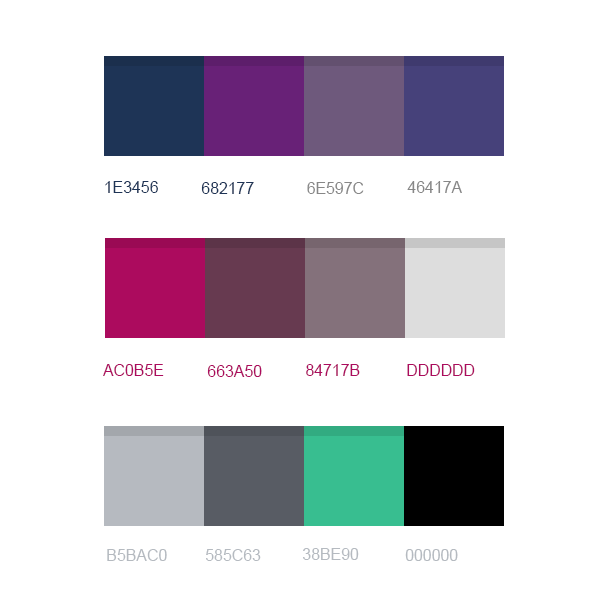
<style>
.page{position:relative;width:600px;height:600px;background:#ffffff}
.page>*{position:absolute;margin:0}
.t1{font:15.9px "ArialMT";color:#1e3456;text-transform:uppercase}
.t2{font:15.9px "ArialMT";color:#878787;text-transform:uppercase}
.t3{font:15.9px "ArialMT";color:#ac0b5e;text-transform:uppercase}
.t4{font:15.9px "ArialMT";color:#b5bac0;text-transform:uppercase}
</style>
<div class="page">
<p class="t1" style="left:105px;top:181px;width:53px;height:12px">1e3456</p>
<p class="t1" style="left:201px;top:182px;width:53px;height:12px">682177</p>
<p class="t2" style="left:307px;top:182px;width:57px;height:12px">6e597c</p>
<p class="t2" style="left:407px;top:181px;width:55px;height:12px">46417a</p>
<p class="t3" style="left:103px;top:364px;width:61px;height:12px">ac0b5e</p>
<p class="t3" style="left:207px;top:365px;width:55px;height:12px">663a50</p>
<p class="t3" style="left:306px;top:364px;width:54px;height:12px">84717b</p>
<p class="t3" style="left:407px;top:364px;width:68px;height:12px">dddddd</p>
<p class="t4" style="left:107px;top:549px;width:60px;height:12px">b5bac0</p>
<p class="t4" style="left:206px;top:549px;width:55px;height:12px">585c63</p>
<p class="t4" style="left:303px;top:548px;width:56px;height:12px">38be90</p>
<p class="t4" style="left:405px;top:549px;width:53px;height:12px">000000</p>
</div>
